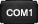
<style>
.page{position:relative;width:38px;height:24px}
.page>*{position:absolute;margin:0}
.t1{font:9.3px "MicrosoftSansSerif";color:#fbfdfd}
</style>
<div class="page">
<p class="t1" style="left:6px;top:9px;width:26px;height:8px">COM1</p>
</div>
